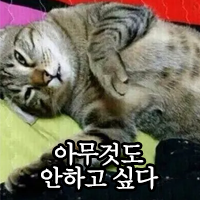
<style>
.page{position:relative;width:200px;height:200px}
.page>*{position:absolute;margin:0}
.t1{font:24px/24px "AdobeMyungjoStd-Medium";letter-spacing:-0.1em;color:#ffffff;font-weight:bold}
</style>
<div class="page">
<p class="t1" style="left:41px;top:142px;width:118px;height:48px;text-align:center">아무것도<br>안하고 싶다</p>
</div>
